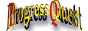
<style>
.page{position:relative;width:88px;height:31px;background:#ffffff}
.page>*{position:absolute;margin:0}
.t1{font:33.7px "PalatinoLinotype-Bold";scale:0.29 1}
</style>
<div class="page">
<p class="t1" style="left:9px;top:0px;width:67px;height:30px">Progress Quest</p>
</div>
